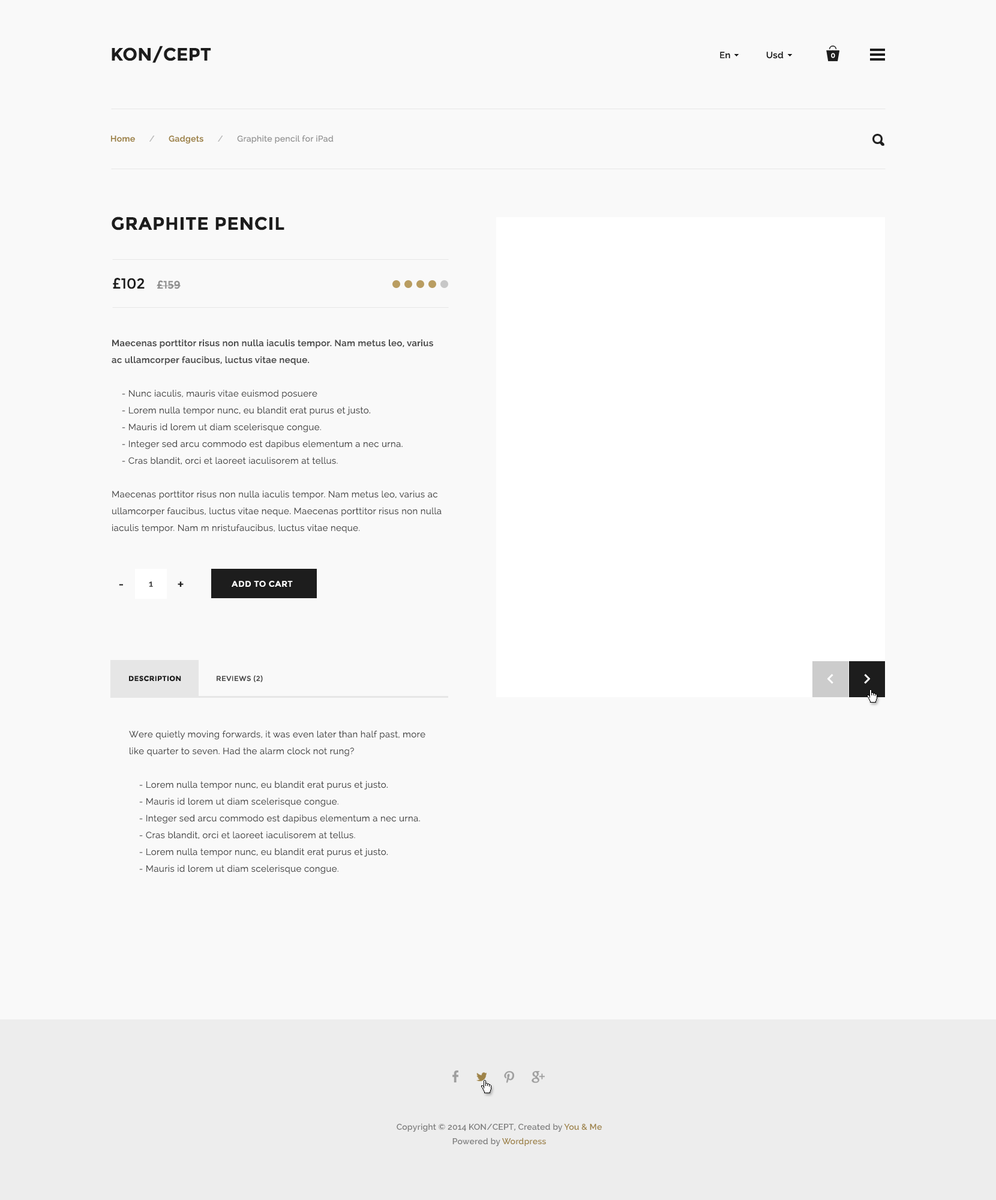
<style>
.page{position:relative;width:996px;height:1200px;background:#f9f9f9}
.page>*{position:absolute;margin:0}
.t1{font:18px "Montserrat-Bold";color:#1d1d1d;text-transform:uppercase}
.t2{font:9px "Raleway-SemiBold";letter-spacing:0.025em;color:#1d1d1d}
.t3{font:6.3px "Montserrat-Regular";letter-spacing:-0.1em;color:#ffffff;text-transform:uppercase}
.t4{font:8.4px "Raleway-Medium";letter-spacing:0.025em;color:#959595}
.t5{font:8.4px "Raleway-SemiBold";letter-spacing:0.025em;color:#9e8348}
.t6{font:8.4px "Raleway-Medium";letter-spacing:0.025em;color:#b8b8b8}
.t7{font:18px "Montserrat-Bold";letter-spacing:0.025em;color:#1d1d1d;text-transform:uppercase}
.t8{font:14.4px "Montserrat-Regular";color:#1d1d1d;text-transform:uppercase}
.t9{font:10.8px "Montserrat-Regular";color:#8e8e8e;text-transform:uppercase}
.t10{font:9px/16.8px "Raleway";letter-spacing:0.025em;color:#4d4d4d}
.t11{font:9px/16.8px "Raleway-SemiBold";letter-spacing:0.025em;color:#4d4d4d}
.t12{font:9px "Raleway-SemiBold";letter-spacing:0.025em;color:#4d4d4d}
.t13{font:10.8px "Montserrat-Bold";letter-spacing:0.025em;color:#1d1d1d;text-transform:uppercase}
.t14{font:8.4px "Montserrat-Bold";letter-spacing:0.025em;color:#ffffff;text-transform:uppercase}
.t15{font:7.2px "Montserrat-Bold";letter-spacing:0.025em;color:#1d1d1d;text-transform:uppercase}
.t16{font:7.2px "Montserrat-Regular";letter-spacing:0.025em;color:#4d4d4d;text-transform:uppercase}
.t17{font:9px/15.6px "Raleway";letter-spacing:0.025em;color:#4d4d4d}
.t18{font:8.4px/14.4px "Raleway-SemiBold";letter-spacing:0.01em;color:#7d7d7d}
.t19{font:8.4px/14.4px "Raleway-SemiBold";letter-spacing:0.01em;color:#9e8348}
</style>
<div class="page">
<p class="t1" style="left:112px;top:46px;width:99px;height:17px">kON/CEPT</p>
<p class="t2" style="left:720px;top:52px;width:10px;height:6px">En</p>
<p class="t2" style="left:766px;top:52px;width:18px;height:7px">Usd</p>
<p class="t3" style="left:831px;top:53px;width:4px;height:5px">0</p>
<p class="t4" style="left:111px;top:135px;width:223px;height:9px"><span class="t5">Home      </span><span class="t6">/      </span><span class="t5">Gadgets      </span><span class="t6">/      </span>Graphite pencil for iPad</p>
<p class="t7" style="left:112px;top:217px;width:172px;height:13px">Graphite pencil</p>
<p class="t8" style="left:113px;top:278px;width:68px;height:11px">£102   <span class="t9">£159</span></p>
<p class="t10" style="left:112px;top:339px;width:330px;height:194px"><span class="t11">Maecenas porttitor risus non nulla iaculis tempor. Nam metus leo, varius ac ullamcorper faucibus, luctus vitae neque.<br></span><br>    - Nunc iaculis, mauris vitae euismod posuere<br>    - Lorem nulla tempor nunc, eu blandit erat purus et justo.<br>    - Mauris id lorem ut diam scelerisque congue.<br>    - Integer sed arcu commodo est dapibus elementum a nec urna.<br>    - Cras blandit, orci et laoreet iaculisorem at tellus.<br><br>Maecenas porttitor risus non nulla iaculis tempor. Nam metus leo, varius ac ullamcorper faucibus, luctus vitae neque. Maecenas porttitor risus non nulla iaculis tempor. Nam m nristufaucibus, luctus vitae neque.</p>
<p class="t12" style="left:149px;top:581px;width:4px;height:6px">1</p>
<p class="t13" style="left:178px;top:581px;width:6px;height:6px">+</p>
<p class="t14" style="left:232px;top:581px;width:61px;height:6px">Add to cart</p>
<p class="t13" style="left:119px;top:584px;width:4px;height:2px">-</p>
<p class="t15" style="left:129px;top:676px;width:52px;height:6px">Description</p>
<p class="t16" style="left:217px;top:675px;width:46px;height:7px">Reviews (2)</p>
<p class="t10" style="left:129px;top:730px;width:296px;height:144px"><span class="t17">Were quietly moving forwards, it was even later than half past, more like quarter to seven. Had the alarm clock not rung?</span>    <br><br>    - Lorem nulla tempor nunc, eu blandit erat purus et justo.<br>    - Mauris id lorem ut diam scelerisque congue.<br>    - Integer sed arcu commodo est dapibus elementum a nec urna.<br>    - Cras blandit, orci et laoreet iaculisorem at tellus.<br>    - Lorem nulla tempor nunc, eu blandit erat purus et justo.<br>    - Mauris id lorem ut diam scelerisque congue.</p>
<p class="t18" style="left:397px;top:1123px;width:205px;height:24px;text-align:center">Copyright © 2014 KON/CEPT, Created by <span class="t19">You &amp; Me<br></span>Powered by <span class="t19">Wordpress</span></p>
</div>
